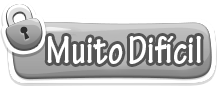
<style>
.page{position:relative;width:217px;height:86px;background:#ffffff}
.page>*{position:absolute;margin:0}
.t1{font:40.6px "TektonPro-BoldCond";color:#ffffff;scale:0.97 1}
</style>
<div class="page">
<p class="t1" style="left:47px;top:36px;width:154px;height:28px">Muito Difícil</p>
</div>
